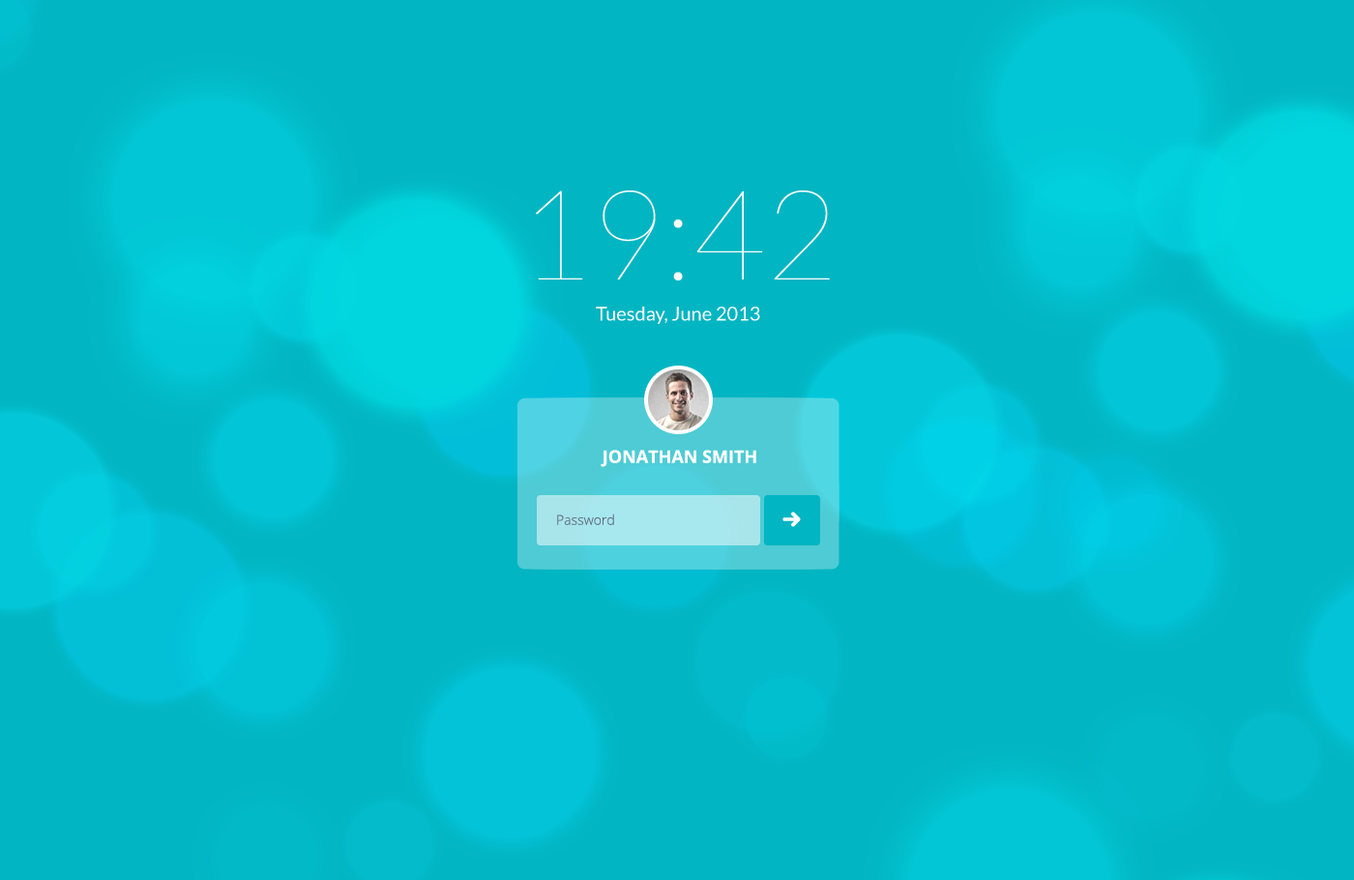
<style>
.page{position:relative;width:1354px;height:880px;background:#02b5c2}
.page>*{position:absolute;margin:0}
.t1{font:125.8px "Lato-Hairline";color:#ffffff}
.t2{font:19.3px "Lato-Regular";color:#ffffff}
.t3{font:17.4px "OpenSans-Bold";color:#ffffff;text-transform:uppercase}
</style>
<div class="page">
<p class="t1" style="left:536px;top:191px;width:294px;height:90px">19:42</p>
<p class="t2" style="left:596px;top:307px;width:164px;height:17px">Tuesday, June 2013</p>
<p class="t3" style="left:601px;top:450px;width:156px;height:17px">Jonathan Smith</p>
</div>
